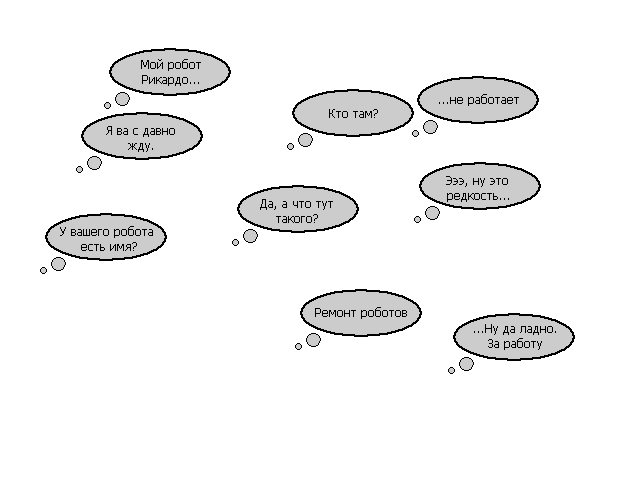
<style>
.page{position:relative;width:640px;height:480px;background:#ffffff}
.page>*{position:absolute;margin:0}
.t1{font:12px "Tahoma";color:#000000}
</style>
<div class="page">
<p class="t1" style="left:141px;top:59px;width:60px;height:27px;text-align:center">Мой робот<br>Рикардо...</p>
<p class="t1" style="left:439px;top:94px;width:80px;height:12px">...не работает</p>
<p class="t1" style="left:329px;top:109px;width:49px;height:9px">Кто там?</p>
<p class="t1" style="left:106px;top:126px;width:69px;height:26px;text-align:center">Я ва с давно<br>жду.</p>
<p class="t1" style="left:446px;top:176px;width:63px;height:26px;text-align:center">Эээ, ну это <br>редкость...</p>
<p class="t1" style="left:260px;top:199px;width:73px;height:24px;text-align:center">Да, а что тут<br>такого?</p>
<p class="t1" style="left:60px;top:226px;width:93px;height:25px;text-align:center">У вашего робота <br>есть имя?</p>
<p class="t1" style="left:315px;top:307px;width:92px;height:12px">Ремонт роботов</p>
<p class="t1" style="left:474px;top:324px;width:82px;height:26px;text-align:center">...Ну да ладно.<br>За работу</p>
</div>
